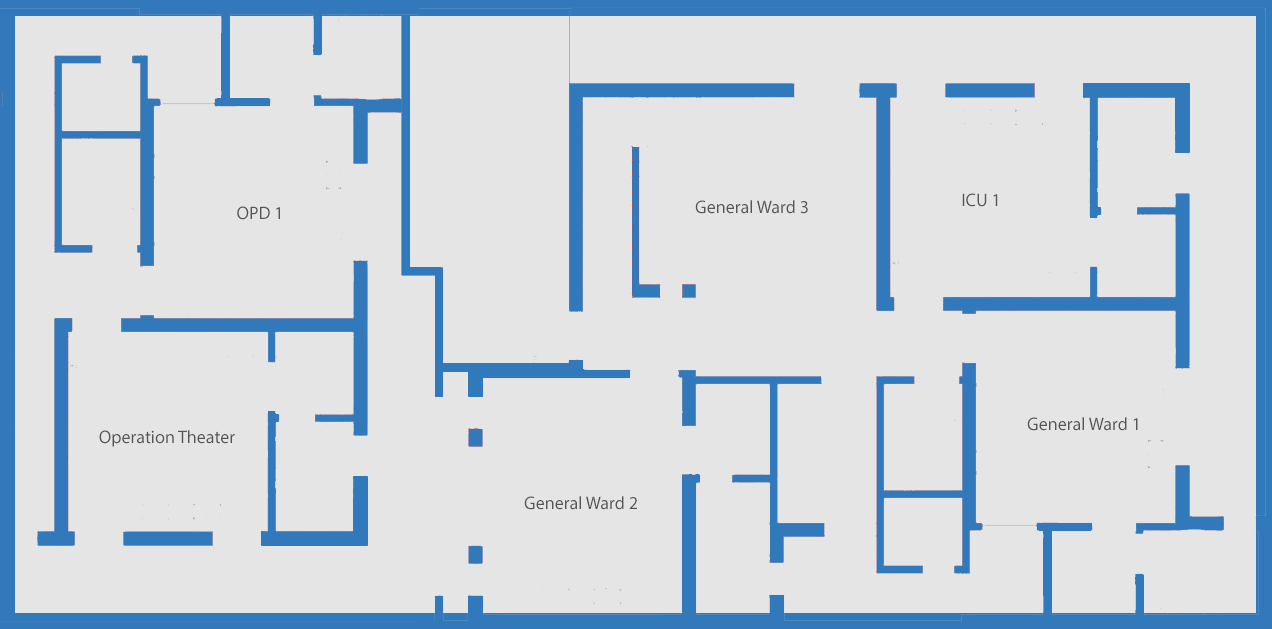
<style>
.page{position:relative;width:1272px;height:629px;background:#e5e5e5}
.page>*{position:absolute;margin:0}
.t1{font:18px "MyriadPro-Regular";color:#555555}
</style>
<div class="page">
<p class="t1" style="left:962px;top:193px;width:36px;height:14px">ICU 1</p>
<p class="t1" style="left:237px;top:206px;width:43px;height:14px">OPD 1</p>
<p class="t1" style="left:695px;top:200px;width:113px;height:14px">General Ward 3</p>
<p class="t1" style="left:1027px;top:417px;width:111px;height:14px">General Ward 1</p>
<p class="t1" style="left:99px;top:430px;width:136px;height:17px">Operation Theater</p>
<p class="t1" style="left:524px;top:496px;width:113px;height:14px">General Ward 2</p>
</div>
